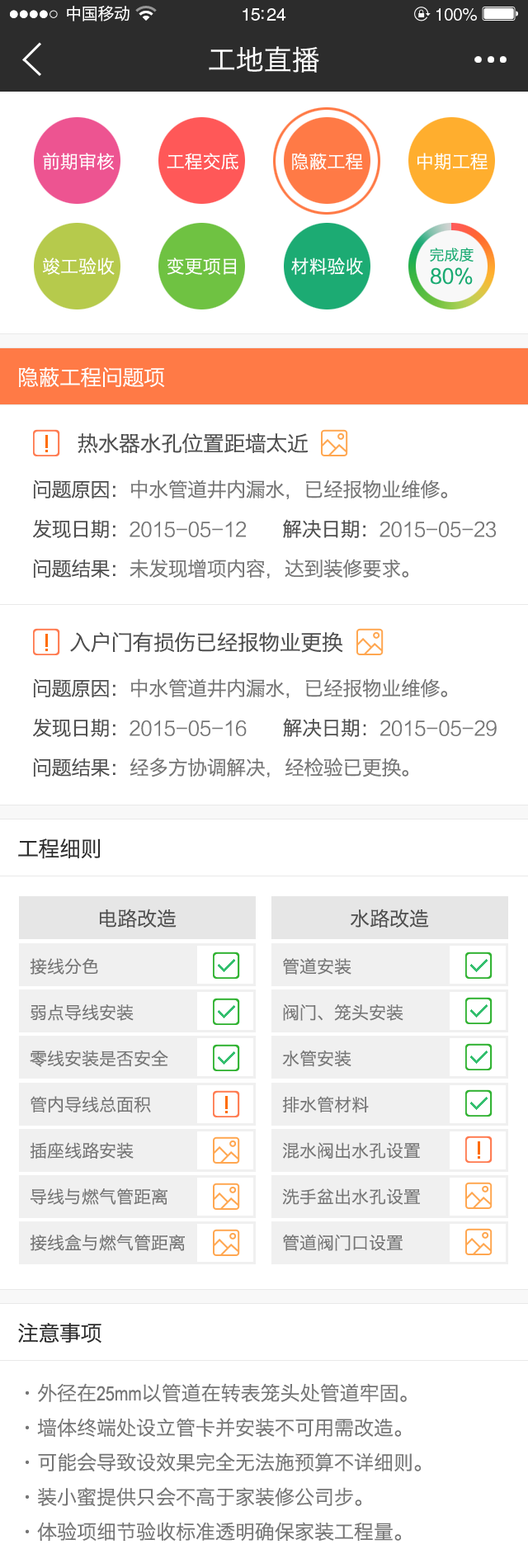
<style>
.page{position:relative;width:528px;height:1568px;background:#ffffff}
.page>*{position:absolute;margin:0}
.t1{font:16.5px "HiraginoSansGB-W3";letter-spacing:-0.02em;color:#ffffff}
.t2{font:17.7px "HelveticaLTStd-Roman";letter-spacing:-0.02em;color:#ffffff}
.t3{font:17px "HelveticaLTStd-Roman";letter-spacing:-0.02em;color:#ffffff}
.t4{font:28.1px "HiraginoSansGB-W3";color:#ffffff}
.t5{font:18.2px "HiraginoSansGB-W3";color:#ffffff}
.t6{font:14.9px "HiraginoSansGB-W3";color:#1cab73}
.t7{font:19.8px "FZLTHJW--GB1-0";color:#1cab73}
.t8{font:21.5px "HiraginoSansGB-W3";letter-spacing:-0.02em;color:#ffffff}
.t9{font:21.5px "HiraginoSansGB-W3";letter-spacing:-0.02em;color:#4e4e4e}
.t10{font:19.8px/39.6px "HiraginoSansGB-W3";letter-spacing:-0.02em;color:#757575}
.t11{font:19.8px/39.6px "HiraginoSansGB-W3";letter-spacing:-0.02em;color:#4e4e4e}
.t12{font:19.8px/39.6px "FZLTXHK";letter-spacing:-0.02em;color:#757575}
.t13{font:21.5px "HiraginoSansGB-W3";letter-spacing:-0.02em;color:#2c2c2c}
.t14{font:19.8px "HiraginoSansGB-W3";color:#4e4e4e}
.t15{font:17.3px/46px "HiraginoSansGB-W3";color:#757575}
.t16{font:19.8px/34.7px "HiraginoSansGB-W3";color:#757575}
.t17{font:19.8px/34.7px "ArialNarrow";color:#757575}
</style>
<div class="page">
<p class="t1" style="left:67px;top:6px;width:63px;height:15px">中国移动</p>
<p class="t2" style="left:243px;top:8px;width:43px;height:13px">15:24</p>
<p class="t3" style="left:437px;top:8px;width:40px;height:13px">100%</p>
<p class="t4" style="left:209px;top:46px;width:110px;height:27px">工地直播</p>
<p class="t5" style="left:43px;top:153px;width:445px;height:17px">前期审核      工程交底     隐蔽工程      中期工程</p>
<p class="t5" style="left:42px;top:257px;width:321px;height:18px">竣工验收      变更项目     材料验收</p>
<p class="t6" style="left:430px;top:248px;width:44px;height:14px">完成度</p>
<p class="t7" style="left:431px;top:267px;width:42px;height:18px">80%</p>
<p class="t8" style="left:19px;top:367px;width:146px;height:21px">隐蔽工程问题项</p>
<p class="t9" style="left:78px;top:433px;width:231px;height:21px">热水器水孔位置距墙太近</p>
<p class="t10" style="left:33px;top:479px;width:464px;height:100px"><span class="t11">问题原因：</span>中水管道井内漏水，已经报物业维修。<br><span class="t11">发现日期：</span><span class="t12">2015-05-12       </span><span class="t11">解决日期：</span><span class="t12">2015-05-23<br></span><span class="t11">问题结果：</span>未发现增项内容，达到装修要求。</p>
<p class="t9" style="left:70px;top:632px;width:273px;height:21px">入户门有损伤已经报物业更换</p>
<p class="t10" style="left:33px;top:678px;width:464px;height:99px"><span class="t11">问题原因：</span>中水管道井内漏水，已经报物业维修。<br><span class="t11">发现日期：</span><span class="t12">2015-05-16       </span><span class="t11">解决日期：</span><span class="t12">2015-05-29<br></span><span class="t11">问题结果：</span>经多方协调解决，经检验已更换。</p>
<p class="t13" style="left:18px;top:838px;width:82px;height:21px">工程细则</p>
<p class="t14" style="left:100px;top:909px;width:77px;height:19px">电路改造</p>
<p class="t14" style="left:351px;top:909px;width:78px;height:19px">水路改造</p>
<p class="t15" style="left:30px;top:958px;width:155px;height:293px">接线分色<br>弱点导线安装<br>零线安装是否安全<br>管内导线总面积<br>插座线路安装<br>导线与燃气管距离<br>接线盒与燃气管距离</p>
<p class="t15" style="left:282px;top:958px;width:138px;height:293px">管道安装<br>阀门、笼头安装<br>水管安装<br>排水管材料<br>混水阀出水孔设置<br>洗手盆出水孔设置<br>管道阀门口设置</p>
<p class="t13" style="left:18px;top:1323px;width:84px;height:20px">注意事项</p>
<p class="t16" style="left:26px;top:1383px;width:396px;height:158px">·外径在<span class="t17">25mm</span>以管道在转表笼头处管道牢固。<br>·墙体终端处设立管卡并安装不可用需改造。<br>·可能会导致设效果完全无法施预算不详细则。<br>·装小蜜提供只会不高于家装修公司步。<br>·体验项细节验收标准透明确保家装工程量。</p>
</div>
